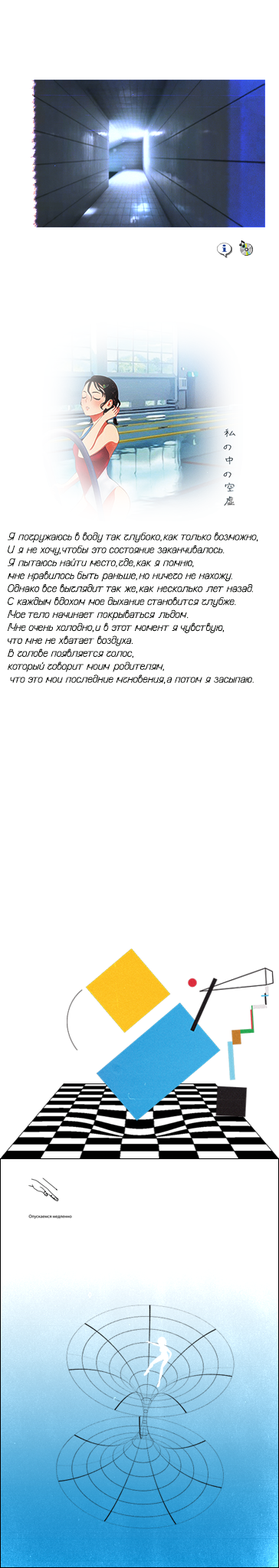
<style>
.page{position:relative;width:279px;height:1568px;background:#ffffff}
.page>*{position:absolute;margin:0}
.t1{font:10.8px "Aero-Regular";color:#020401}
</style>
<div class="page">
<p class="t1" style="left:7px;top:532px;width:251px;height:152px">Я погружаюсь в воду так глубоко, как только возможно, <br>И я не хочу, чтобы это состояние заканчивалось.<br>Я пытаюсь найти место, где, как я помню, <br>мне нравилось быть раньше, но ничего не нахожу.<br>Однако все выглядит так же, как несколько лет назад.<br>С каждым вдохом мое дыхание становится глубже.<br>Мое тело начинает покрываться льдом.<br>Мне очень холодно, и в этот момент я чувствую, <br>что мне не хватает воздуха.<br>В голове появляется голос, <br>который говорит моим родителям,  <br> что это мои последние мгновения, а потом я засыпаю.</p>
</div>
